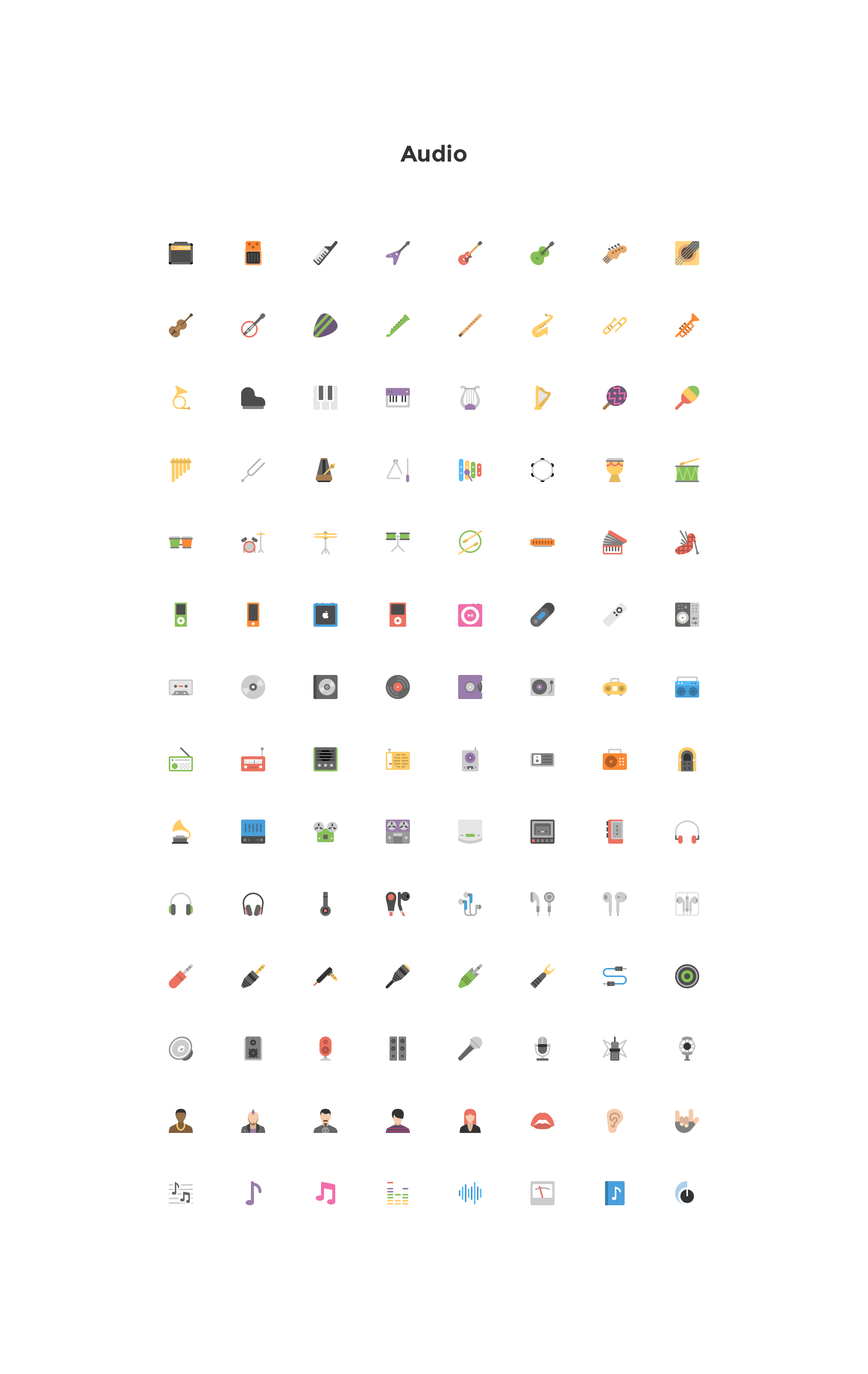
<style>
.page{position:relative;width:868px;height:1374px;background:#ffffff}
.page>*{position:absolute;margin:0}
.t1{font:22.6px "Montserrat-Bold";color:#333333}
</style>
<div class="page">
<p class="t1" style="left:400px;top:144px;width:67px;height:18px">Audio</p>
</div>
